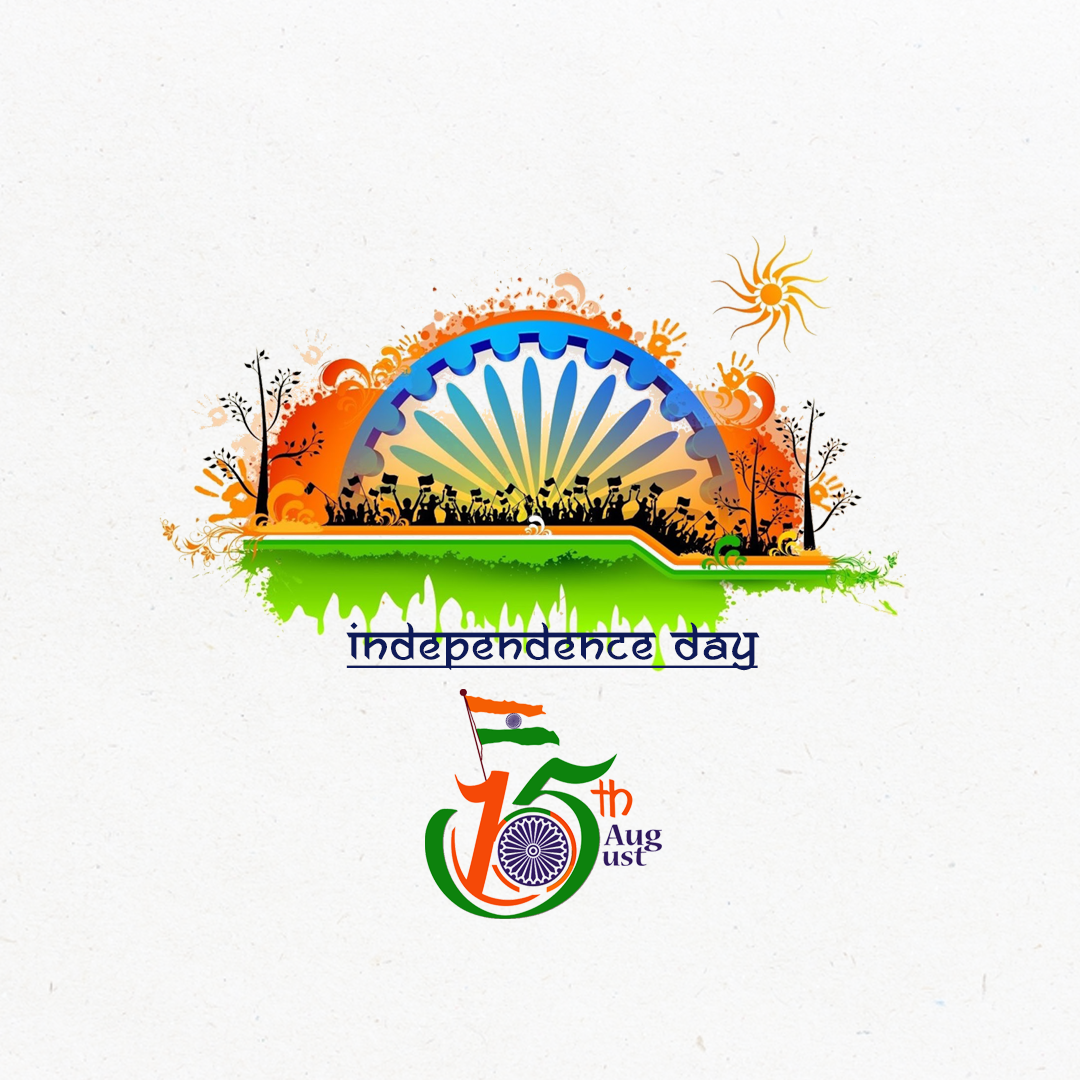
<style>
.page{position:relative;width:1080px;height:1080px}
.page>*{position:absolute;margin:0}
.t1{font:50.1px "AnandaNamaste";color:#0e1a58;font-weight:bold;text-decoration:underline}
</style>
<div class="page">
<p class="t1" style="left:346px;top:622px;width:414px;height:49px">Independence Day</p>
</div>
